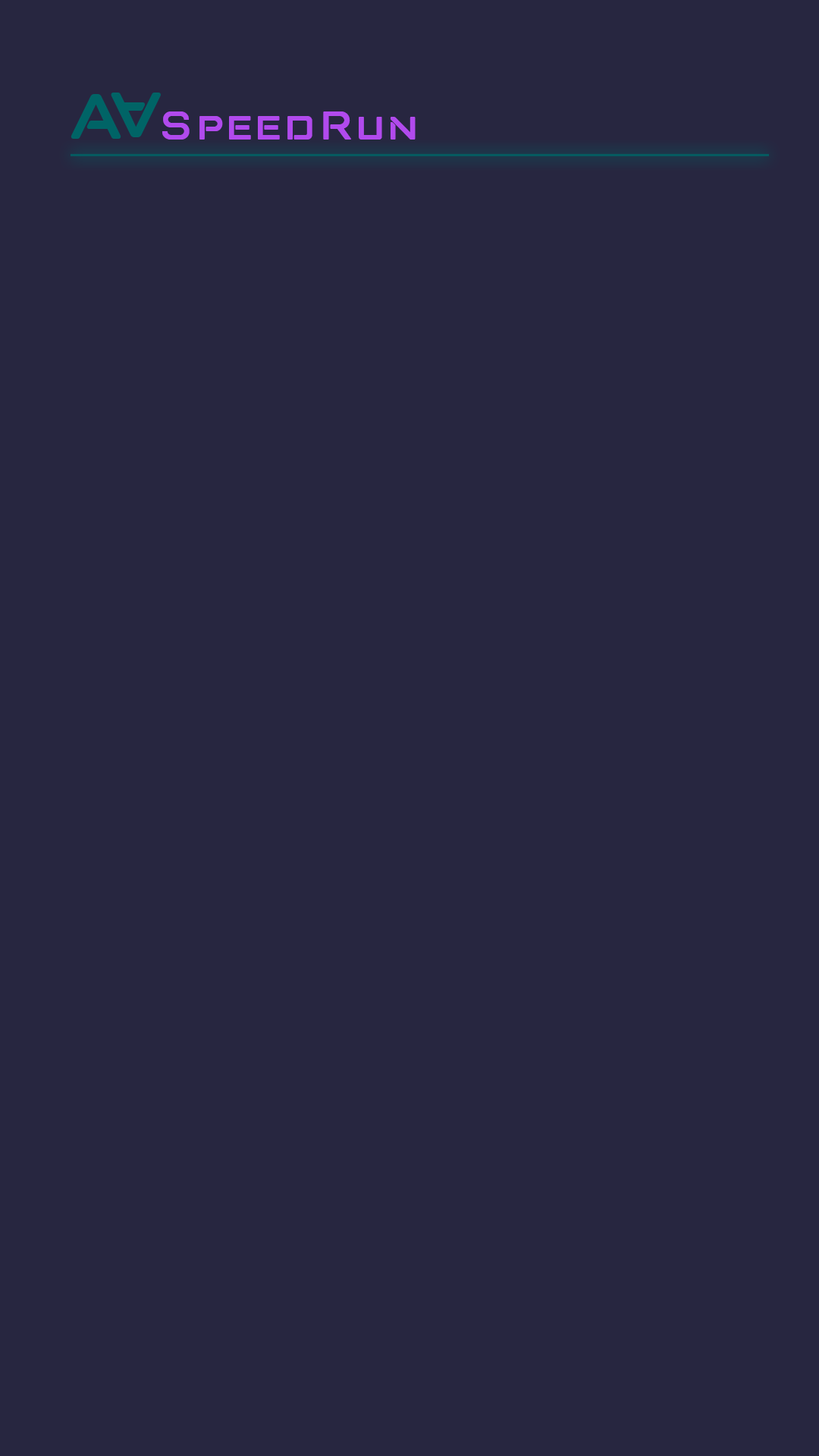
<style>
.page{position:relative;width:819px;height:1456px;background:#272640}
.page>*{position:absolute;margin:0}
.t1{font:52.2px "neo-latina";color:#b14aed;font-weight:bold}
</style>
<div class="page">
<p class="t1" style="left:162px;top:111px;width:254px;height:29px">SpeedRun</p>
</div>
